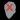
<style>
.page{position:relative;width:20px;height:20px;background:#000000}
.page>*{position:absolute;margin:0}
.t1{font:9px "MicrosoftSansSerif";color:#c74444;scale:1.18 1}
</style>
<div class="page">
<p class="t1" style="left:6px;top:4px;width:7px;height:7px">X</p>
</div>
